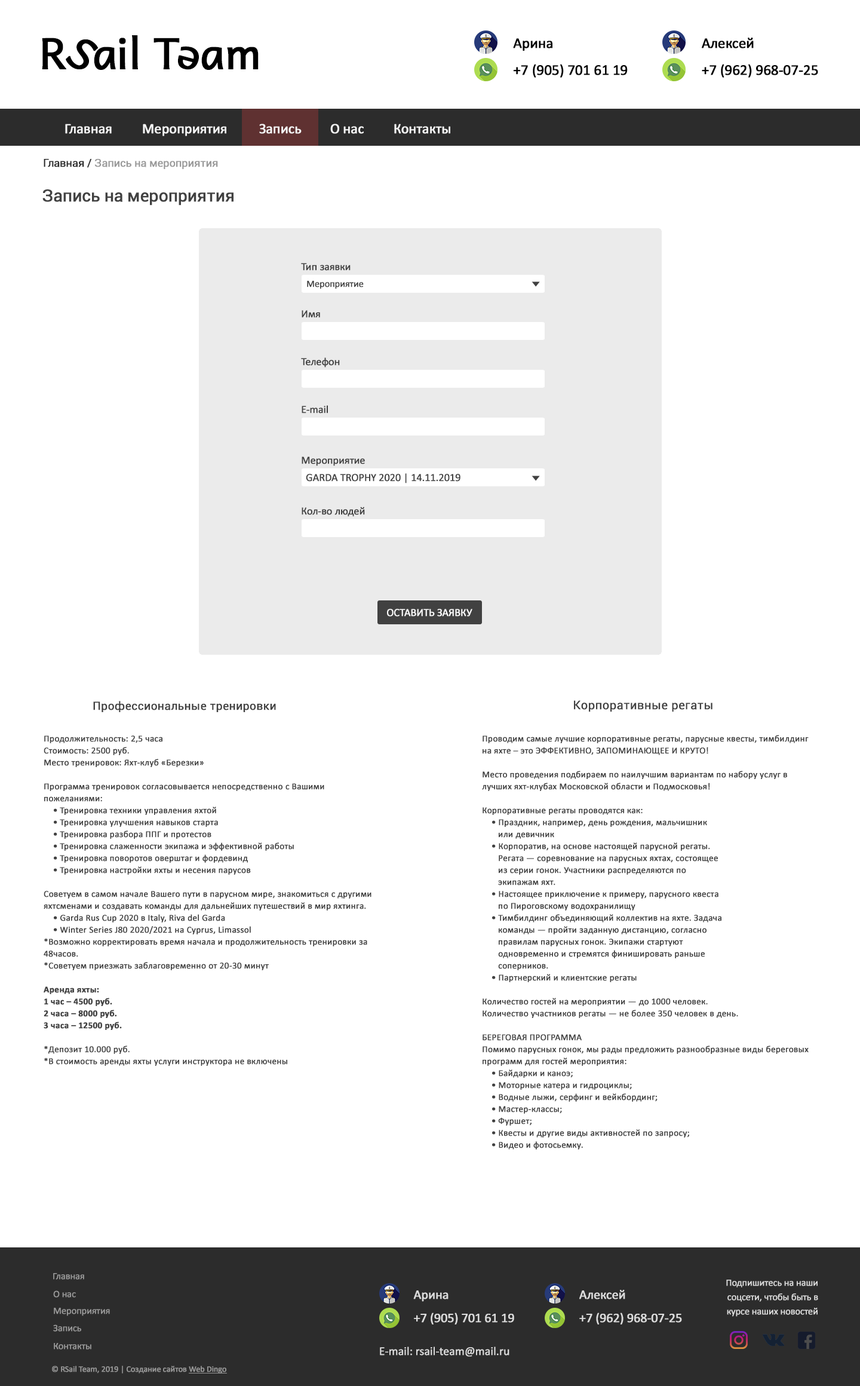
<style>
.page{position:relative;width:860px;height:1386px;background:#ffffff}
.page>*{position:absolute;margin:0}
.t1{font:42.9px "Andika";letter-spacing:-0.02em;color:#000000;font-weight:bold}
.t2{font:43px "Andika";letter-spacing:-0.02em;color:#000000;font-weight:bold}
.t3{font:14.9px "Calibri";letter-spacing:-0.02em;color:#000000;font-weight:bold}
.t4{font:14.3px "Calibri";letter-spacing:-0.02em;color:#f6f6f6;font-weight:bold}
.t5{font:10.8px "Roboto-Regular";letter-spacing:-0.02em;color:#999999;font-weight:bold}
.t6{font:10.8px "Roboto-Regular";letter-spacing:-0.02em;color:#2c2c2c;font-weight:bold}
.t7{font:16.7px "Roboto-Regular";letter-spacing:-0.02em;color:#414141;font-weight:bold}
.t8{font:10.8px "Calibri";letter-spacing:-0.02em;color:#414141;font-weight:bold}
.t9{font:9.6px "Calibri";letter-spacing:-0.02em;color:#414141;font-weight:bold}
.t10{font:6.8px "Tahoma";letter-spacing:-0.02em;color:#414141;font-weight:bold;scale:1.58 1}
.t11{font:10.8px "Calibri";letter-spacing:-0.02em;color:#ffffff;text-transform:uppercase;font-weight:bold}
.t12{font:11.4px "Roboto-Regular";letter-spacing:0.005em;color:#414141;font-weight:bold}
.t13{font:11.9px "Roboto-Regular";letter-spacing:0.005em;color:#414141;font-weight:bold}
.t14{font:9px/11.9px "Calibri";letter-spacing:0.005em;color:#414141;font-weight:bold}
.t15{font:9px/11.9px "Calibri-Bold";letter-spacing:0.005em;color:#414141;font-weight:bold}
.t16{font:9.6px "Calibri";letter-spacing:-0.02em;color:#999999;font-weight:bold}
.t17{font:13.2px "Calibri";letter-spacing:-0.02em;color:#dcdcdc;font-weight:bold}
.t18{font:9.6px/14.3px "Calibri";letter-spacing:-0.02em;color:#dcdcdc;font-weight:bold}
.t19{font:11.9px "Calibri";letter-spacing:-0.02em;color:#dcdcdc;font-weight:bold}
.t20{font:8.4px "Calibri";letter-spacing:-0.02em;color:#999999;font-weight:bold}
</style>
<div class="page">
<p class="t1" style="left:42px;top:38px;width:24px;height:31px">R</p>
<p class="t2" style="left:66px;top:39px;width:33px;height:30px;rotate:34deg">S</p>
<p class="t1" style="left:119px;top:38px;width:7px;height:31px">i</p>
<p class="t1" style="left:132px;top:35px;width:6px;height:34px">l</p>
<p class="t1" style="left:154px;top:38px;width:26px;height:31px">T</p>
<p class="t3" style="left:513px;top:38px;width:40px;height:13px">Арина</p>
<p class="t3" style="left:702px;top:38px;width:52px;height:10px">Алексей</p>
<p class="t1" style="left:94px;top:47px;width:22px;height:23px">a</p>
<p class="t1" style="left:178px;top:46px;width:21px;height:24px;rotate:-165deg">e</p>
<p class="t1" style="left:201px;top:47px;width:22px;height:23px">a</p>
<p class="t1" style="left:227px;top:47px;width:32px;height:22px">m</p>
<p class="t3" style="left:513px;top:64px;width:115px;height:14px">+7 (905) 701 61 19</p>
<p class="t3" style="left:702px;top:64px;width:116px;height:14px">+7 (962) 968-07-25</p>
<p class="t4" style="left:65px;top:124px;width:47px;height:10px">Главная</p>
<p class="t4" style="left:143px;top:124px;width:83px;height:12px">Мероприятия</p>
<p class="t4" style="left:259px;top:124px;width:43px;height:10px">Запись</p>
<p class="t4" style="left:330px;top:124px;width:34px;height:10px">О нас</p>
<p class="t4" style="left:394px;top:124px;width:56px;height:10px">Контакты</p>
<p class="t5" style="left:44px;top:159px;width:174px;height:10px"><span class="t6">Главная / </span>Запись на мероприятия</p>
<p class="t7" style="left:42px;top:189px;width:192px;height:17px">Запись на мероприятия</p>
<p class="t8" style="left:301px;top:263px;width:50px;height:8px">Тип заявки</p>
<p class="t9" style="left:307px;top:281px;width:57px;height:8px">Мероприятие</p>
<p class="t10" style="left:532px;top:281px;width:8px;height:6px">▼</p>
<p class="t8" style="left:302px;top:310px;width:18px;height:8px">Имя</p>
<p class="t8" style="left:301px;top:357px;width:39px;height:10px">Телефон</p>
<p class="t8" style="left:302px;top:405px;width:26px;height:8px">E-mail</p>
<p class="t8" style="left:302px;top:456px;width:63px;height:10px">Мероприятие</p>
<p class="t8" style="left:306px;top:473px;width:155px;height:10px">GARDA TROPHY 2020 | 14.11.2019</p>
<p class="t10" style="left:532px;top:476px;width:8px;height:5px">▼</p>
<p class="t8" style="left:302px;top:507px;width:63px;height:10px">Кол-во людей</p>
<p class="t11" style="left:387px;top:609px;width:86px;height:8px">Оставить заявку</p>
<p class="t12" style="left:93px;top:701px;width:183px;height:11px">Профессиональные тренировки</p>
<p class="t13" style="left:574px;top:700px;width:139px;height:12px">Корпоративные регаты</p>
<p class="t14" style="left:44px;top:735px;width:328px;height:331px">Продолжительность: 2,5 часа<br>Стоимость: 2500 руб.<br>Место тренировок: Яхт-клуб «Березки»<br><br>Программа тренировок согласовывается непосредственно с Вашими пожеланиями:<br>    • Тренировка техники управления яхтой<br>    • Тренировка улучшения навыков старта <br>    • Тренировка разбора ППГ и протестов<br>    • Тренировка слаженности экипажа и эффективной работы <br>    • Тренировка поворотов оверштаг и фордевинд<br>    • Тренировка настройки яхты и несения парусов<br><br>Советуем в самом начале Вашего пути в парусном мире, знакомиться с другими яхтсменами и создавать команды для дальнейших путешествий в мир яхтинга.<br>    • Garda Rus Cup 2020 в Italy, Riva del Garda<br>    • Winter Series J80 2020/2021 на Cyprus, Limassol<br>*Возможно корректировать время начала и продолжительность тренировки за 48часов.<br>*Советуем приезжать заблаговременно от 20-30 минут<br><br><span class="t15">Аренда яхты:<br>1 час – 4500 руб.<br>2 часа – 8000 руб.<br>3 часа – 12500 руб.<br><br></span>*Депозит 10.000 руб.<br>*В стоимость аренды яхты услуги инструктора не включены</p>
<p class="t14" style="left:482px;top:735px;width:327px;height:414px">Проводим самые лучшие корпоративные регаты, парусные квесты, тимбилдинг на яхте – это ЭФФЕКТИВНО, ЗАПОМИНАЮЩЕЕ И КРУТО!<br><br>Место проведения подбираем по наилучшим вариантам по набору услуг в лучших яхт-клубах Московской области и Подмосковья!<br><br>Корпоративные регаты проводятся как:<br>    • Праздник, например, день рождения, мальчишник<br>       или девичник<br>    • Корпоратив, на основе настоящей парусной регаты.<br>       Регата — соревнование на парусных яхтах, состоящее<br>       из серии гонок. Участники распределяются по<br>       экипажам яхт.<br>    • Настоящее приключение к примеру, парусного квеста<br>       по Пироговскому водохранилищу<br>    • Тимбилдинг объединяющий коллектив на яхте. Задача <br>       команды — пройти заданную дистанцию, согласно<br>       правилам парусных гонок. Экипажи стартуют<br>       одновременно и стремятся финишировать раньше<br>       соперников.<br>    • Партнерский и клиентские регаты<br><br>Количество гостей на мероприятии — до 1000 человек.<br>Количество участников регаты — не более 350 человек в день.<br><br>БЕРЕГОВАЯ ПРОГРАММА<br>Помимо парусных гонок, мы рады предложить разнообразные виды береговых программ для гостей мероприятия:<br>    • Байдарки и каноэ;<br>    • Моторные катера и гидроциклы;<br>    • Водные лыжи, серфинг и вейкбординг;<br>    • Мастер-классы;<br>    • Фуршет;<br>    • Квесты и другие виды активностей по запросу;<br>    • Видео и фотосьемку.</p>
<p class="t16" style="left:53px;top:1273px;width:31px;height:7px">Главная</p>
<p class="t17" style="left:580px;top:1290px;width:46px;height:9px">Алексей</p>
<p class="t18" style="left:726px;top:1280px;width:92px;height:37px;text-align:right">Подпишитесь на наши<br>соцсети, чтобы быть в<br>курсе наших новостей</p>
<p class="t16" style="left:53px;top:1290px;width:23px;height:8px">О нас</p>
<p class="t17" style="left:413px;top:1290px;width:36px;height:12px">Арина</p>
<p class="t16" style="left:54px;top:1308px;width:56px;height:8px">Мероприятия</p>
<p class="t17" style="left:414px;top:1313px;width:100px;height:12px">+7 (905) 701 61 19</p>
<p class="t17" style="left:580px;top:1313px;width:102px;height:12px">+7 (962) 968-07-25</p>
<p class="t16" style="left:53px;top:1325px;width:28px;height:7px">Запись</p>
<p class="t16" style="left:54px;top:1343px;width:37px;height:7px">Контакты</p>
<p class="t19" style="left:380px;top:1347px;width:130px;height:10px">E-mail: rsail-team@mail.ru</p>
<p class="t20" style="left:52px;top:1366px;width:174px;height:8px">© RSail Team, 2019 | Создание сайтов Web Dingo</p>
</div>
